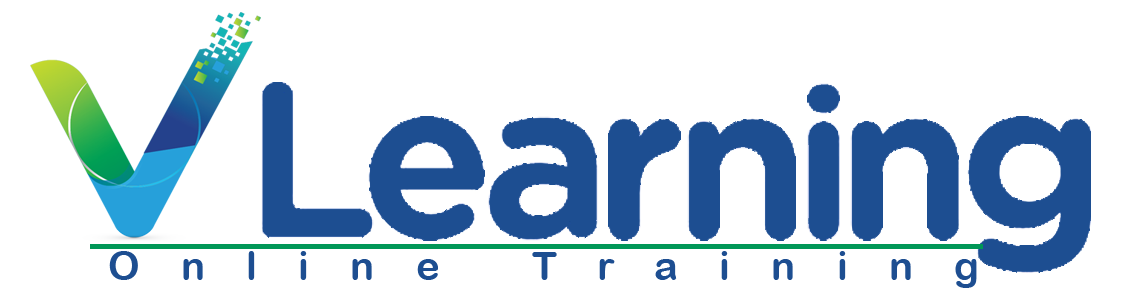
<style>
.page{position:relative;width:1123px;height:304px;background:#ffffff}
.page>*{position:absolute;margin:0}
.t1{font:40px "ArialRoundedMTBold";letter-spacing:1.03em;color:#1d4e91}
</style>
<div class="page">
<p class="t1" style="left:109px;top:251px;width:868px;height:37px">Online Training</p>
</div>
